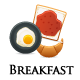
<style>
.page{position:relative;width:80px;height:80px;background:#ffffff}
.page>*{position:absolute;margin:0}
.t1{font:12px "TrajanPro-Regular";letter-spacing:-0.035em;color:#000000;font-weight:bold}
</style>
<div class="page">
<p class="t1" style="left:9px;top:64px;width:65px;height:11px">Breakfast</p>
</div>
